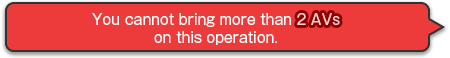
<style>
.page{position:relative;width:450px;height:58px;background:#ed3b3b}
.page>*{position:absolute;margin:0}
.t1{font:14px/18px "GothicMB101Pro-Regular";color:#ffffff}
.t2{font:14px/18px "GothicMB101Pro-Regular";color:#ffd3d3}
</style>
<div class="page">
<p class="t1" style="left:92px;top:13px;width:248px;height:32px;text-align:center">You cannot bring more than <span class="t2">2 AVs<br></span>on this operation.</p>
<p class="t1" style="left:92px;top:13px;width:248px;height:32px;text-align:center">You cannot bring more than <span class="t2">2 AVs<br></span>on this operation.</p>
</div>
